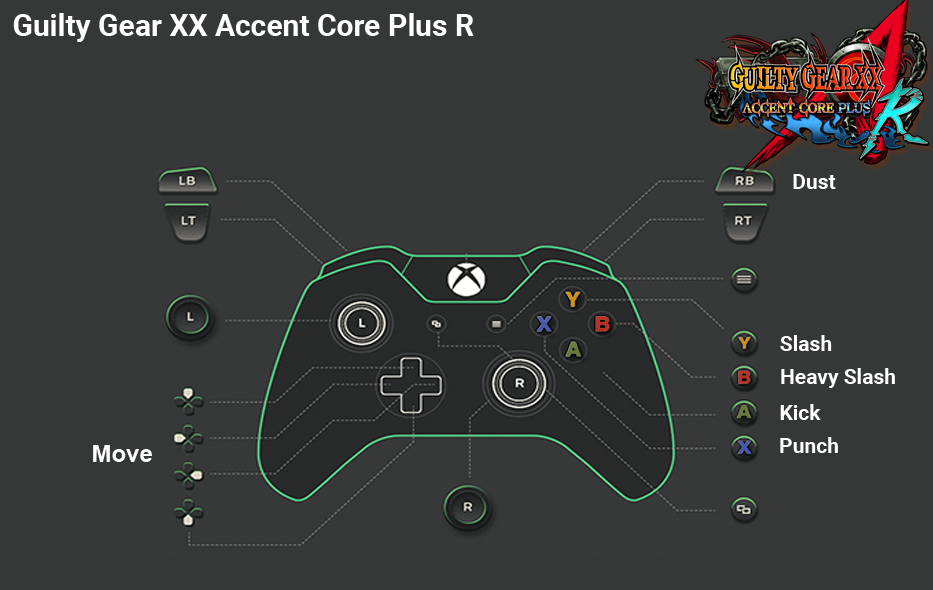
<style>
.page{position:relative;width:933px;height:590px;background:#363838}
.page>*{position:absolute;margin:0}
.t1{font:30px "Roboto-Bold";color:#ffffff}
.t2{font:21px "Roboto-Bold";color:#ffffff}
.t3{font:24px "Arial-BoldMT";color:#fefefe}
</style>
<div class="page">
<p class="t1" style="left:13px;top:13px;width:461px;height:29px">Guilty Gear XX Accent Core Plus R</p>
<p class="t2" style="left:793px;top:174px;width:43px;height:15px">Dust</p>
<p class="t2" style="left:780px;top:335px;width:52px;height:16px">Slash</p>
<p class="t2" style="left:781px;top:368px;width:114px;height:20px">Heavy Slash</p>
<p class="t2" style="left:780px;top:404px;width:41px;height:16px">Kick</p>
<p class="t2" style="left:780px;top:437px;width:58px;height:16px">Punch</p>
<p class="t3" style="left:93px;top:445px;width:59px;height:17px">Move</p>
</div>
